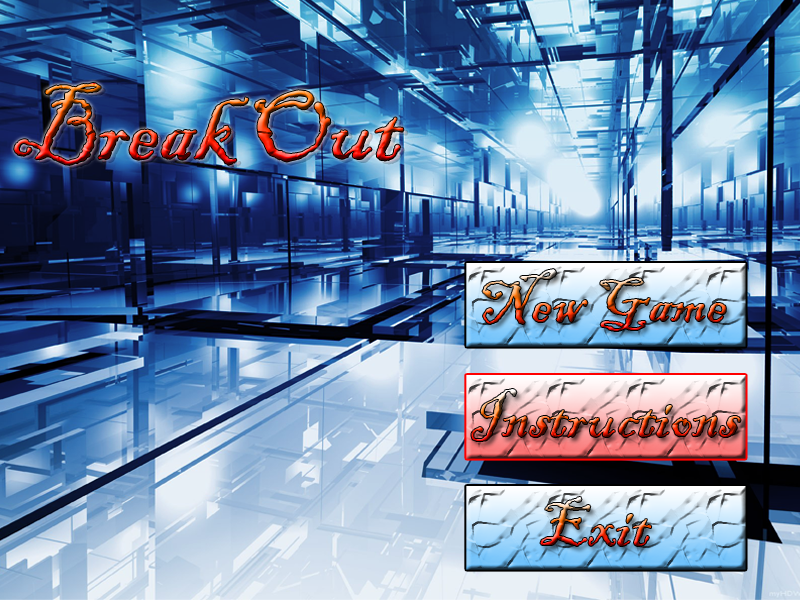
<style>
.page{position:relative;width:800px;height:600px}
.page>*{position:absolute;margin:0}
.t1{font:100px "BlackadderITC-Regular"}
.t2{font:65px "BlackadderITC-Regular"}
</style>
<div class="page">
<p class="t1" style="left:14px;top:83px;width:390px;height:82px">Break Out</p>
<p class="t1" style="left:18px;top:86px;width:390px;height:82px">Break Out</p>
<p class="t2" style="left:482px;top:269px;width:244px;height:62px">New Game</p>
<p class="t2" style="left:471px;top:389px;width:270px;height:52px">Instructions</p>
<p class="t2" style="left:540px;top:497px;width:112px;height:50px">Exit</p>
</div>
